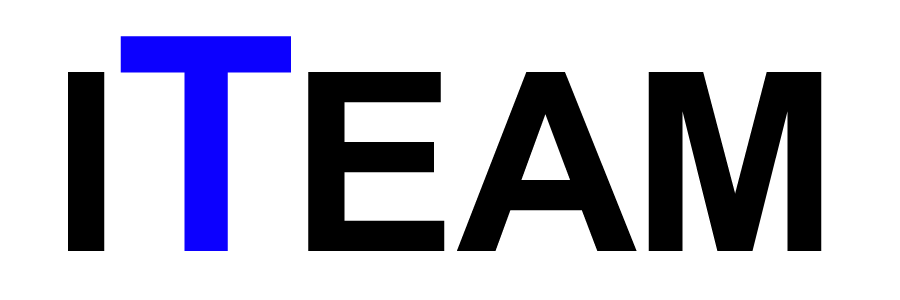
<style>
.page{position:relative;width:900px;height:300px;background:#ffffff}
.page>*{position:absolute;margin:0}
.t1{font:250px "Arial-BoldMT";color:#000000}
.t2{font:300px "Arial-BoldMT";color:#0c00ff}
</style>
<div class="page">
<p class="t1" style="left:68px;top:36px;width:754px;height:215px">I<span class="t2">T</span>EAM</p>
</div>
